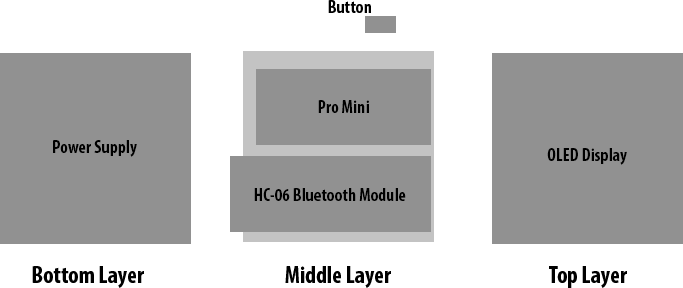
<style>
.page{position:relative;width:683px;height:288px;background:#919191}
.page>*{position:absolute;margin:0}
.t1{font:18px "MyriadPro-BoldCond";color:#000000}
.t2{font:24px "MyriadPro-BoldCond";color:#000000}
</style>
<div class="page">
<p class="t1" style="left:328px;top:0px;width:43px;height:13px">Button</p>
<p class="t1" style="left:318px;top:100px;width:51px;height:13px">Pro Mini</p>
<p class="t1" style="left:53px;top:140px;width:84px;height:17px">Power Supply</p>
<p class="t1" style="left:547px;top:148px;width:80px;height:17px">OLED Display</p>
<p class="t1" style="left:254px;top:188px;width:152px;height:13px">HC-06 Bluetooth Module</p>
<p class="t2" style="left:32px;top:266px;width:112px;height:22px">Bottom Layer</p>
<p class="t2" style="left:285px;top:266px;width:106px;height:22px">Middle Layer</p>
<p class="t2" style="left:549px;top:266px;width:78px;height:22px">Top Layer</p>
</div>
